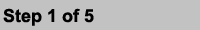
<style>
.page{position:relative;width:200px;height:30px;background:#c2c2c2}
.page>*{position:absolute;margin:0}
.t1{font:18px "Arial-BoldMT";color:#000000}
</style>
<div class="page">
<p class="t1" style="left:3px;top:8px;width:91px;height:18px">Step 1 of 5</p>
</div>
